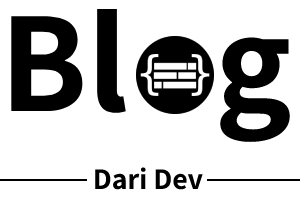
<style>
.page{position:relative;width:300px;height:202px;background:#ffffff}
.page>*{position:absolute;margin:0}
.t1{font:145px "Assistant-Bold";color:#000000}
.t2{font:30px "Assistant-Bold";color:#000000}
</style>
<div class="page">
<p class="t1" style="left:11px;top:9px;width:279px;height:133px">Bl   g</p>
<p class="t2" style="left:95px;top:167px;width:108px;height:23px">Dari Dev</p>
</div>
